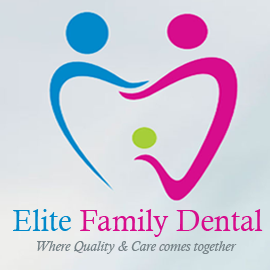
<style>
.page{position:relative;width:270px;height:270px}
.page>*{position:absolute;margin:0}
.t1{font:30px "CalistoMT";color:#d70c8c}
.t2{font:30px "CalistoMT";color:#0089ca}
.t3{font:14px "CalistoMT-Italic";color:#758186}
</style>
<div class="page">
<p class="t1" style="left:13px;top:209px;width:250px;height:28px"><span class="t2">Elite </span>Family Dental</p>
<p class="t3" style="left:37px;top:241px;width:200px;height:13px">Where Quality &amp; Care comes together</p>
</div>
